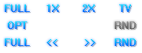
<style>
.page{position:relative;width:142px;height:53px;background:#ffffff}
.page>*{position:absolute;margin:0}
.t1{font:9px "System";letter-spacing:0.05em}
</style>
<div class="page">
<p class="t1" style="left:46px;top:4px;width:13px;height:8px">1X</p>
<p class="t1" style="left:82px;top:4px;width:13px;height:8px">2X</p>
<p class="t1" style="left:119px;top:4px;width:12px;height:8px">TV</p>
<p class="t1" style="left:7px;top:21px;width:21px;height:8px">OPT</p>
<p class="t1" style="left:46px;top:39px;width:12px;height:7px">&lt;&lt;</p>
<p class="t1" style="left:84px;top:39px;width:12px;height:7px">&gt;&gt;</p>
<p class="t1" style="left:114px;top:38px;width:22px;height:8px">RND</p>
</div>
